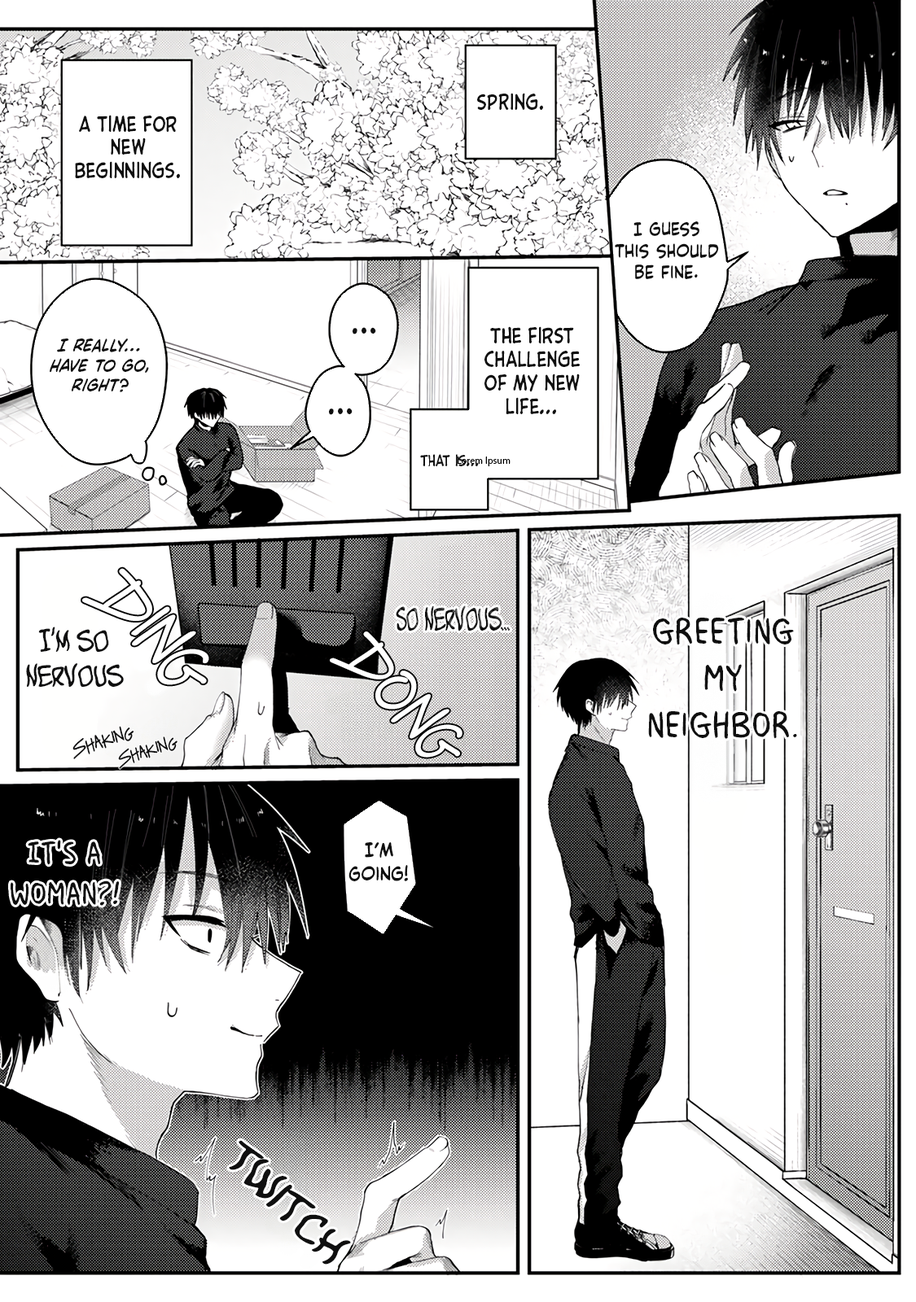
<style>
.page{position:relative;width:916px;height:1302px;background:#ffffff}
.page>*{position:absolute;margin:0}
.t1{font:19.5px "CCSamaritanTall-Regular";color:#0f0f0f}
.t2{font:18px "CCVictorySpeech-Regular";color:#0f0f0f}
.t3{font:31.2px "CCVictorySpeech-Regular";color:#0f0f0f}
.t4{font:16.8px "CCVictorySpeech-Italic";color:#0f0f0f}
.t5{font:14.1px "CCSamaritanTall-Regular";color:#0f0f0f}
.t6{font:9.8px "MyriadPro-Regular";color:#000000}
.t7{font:31px "KomikaBoo";color:#0f0f0f;scale:0.58 1}
.t8{font:39.1px "MilkMustacheBB";color:#0f0f0f}
.t9{font:29.4px "KomikaBoo";color:#0f0f0f;scale:0.78 1}
.t10{font:20px "Raggedways";color:#0f0f0f}
.t11{font:19.4px "Raggedways";color:#0f0f0f}
.t12{font:19.4px "CCVictorySpeech-Regular";color:#0f0f0f}
.t13{font:44.5px "KomikaBoo";color:#0f0f0f}
</style>
<div class="page">
<p class="t1" style="left:477px;top:93px;width:66px;height:17px">Spring.</p>
<p class="t1" style="left:75px;top:115px;width:105px;height:63px;text-align:center">A time for new beginnings.</p>
<p class="t2" style="left:615px;top:221px;width:104px;height:58px;text-align:center">I guess this should be fine.</p>
<p class="t3" style="left:352px;top:327px;width:24px;height:8px">…</p>
<p class="t1" style="left:484px;top:326px;width:96px;height:88px;text-align:center">The first challenge of my new life…</p>
<p class="t4" style="left:50px;top:339px;width:99px;height:53px;text-align:center">I really… have to go, right?</p>
<p class="t3" style="left:329px;top:408px;width:23px;height:7px">…</p>
<p class="t5" style="left:420px;top:454px;width:59px;height:12px">That is…</p>
<p class="t6" style="left:457px;top:457px;width:53px;height:9px">Lorem Ipsum</p>
<p class="t7" style="left:396px;top:606px;width:114px;height:25px">So nervous…</p>
<p class="t8" style="left:648px;top:618px;width:149px;height:121px;text-align:center">Greeting my neighbor.</p>
<p class="t9" style="left:26px;top:627px;width:98px;height:60px;text-align:center">I’m so nervous…!</p>
<p class="t10" style="left:72px;top:726px;width:61px;height:33px;rotate:-18deg">Shaking</p>
<p class="t11" style="left:118px;top:737px;width:59px;height:32px;rotate:-18deg">Shaking</p>
<p class="t12" style="left:348px;top:842px;width:60px;height:39px;text-align:center">I’m going!</p>
<p class="t13" style="left:229px;top:1140px;width:122px;height:125px;rotate:45deg">Twitch</p>
</div>
